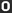
<style>
.page{position:relative;width:12px;height:13px}
.page>*{position:absolute;margin:0}
.t1{font:13.9px "K2D-ExtraBold";color:#ffffff}
</style>
<div class="page">
<p class="t1" style="left:1px;top:1px;width:9px;height:11px">0</p>
</div>
